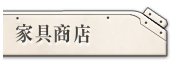
<style>
.page{position:relative;width:174px;height:67px;background:#ffffff}
.page>*{position:absolute;margin:0}
.t1{font:20px "RyuminPr6N-ExBold";letter-spacing:0.075em;color:#47443f;scale:0.9 1}
</style>
<div class="page">
<p class="t1" style="left:15px;top:23px;width:76px;height:21px">家具商店</p>
</div>
